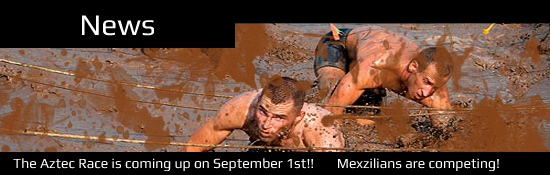
<style>
.page{position:relative;width:550px;height:175px;background:#000000}
.page>*{position:absolute;margin:0}
.t1{font:30px "Play";color:#fdfdfd}
.t2{font:14px "Play";color:#ffffff}
</style>
<div class="page">
<p class="t1" style="left:82px;top:15px;width:72px;height:21px">News</p>
<p class="t2" style="left:13px;top:158px;width:486px;height:13px">The Aztec Race is coming up on September 1st!!       Mexzilians are competing!</p>
</div>
